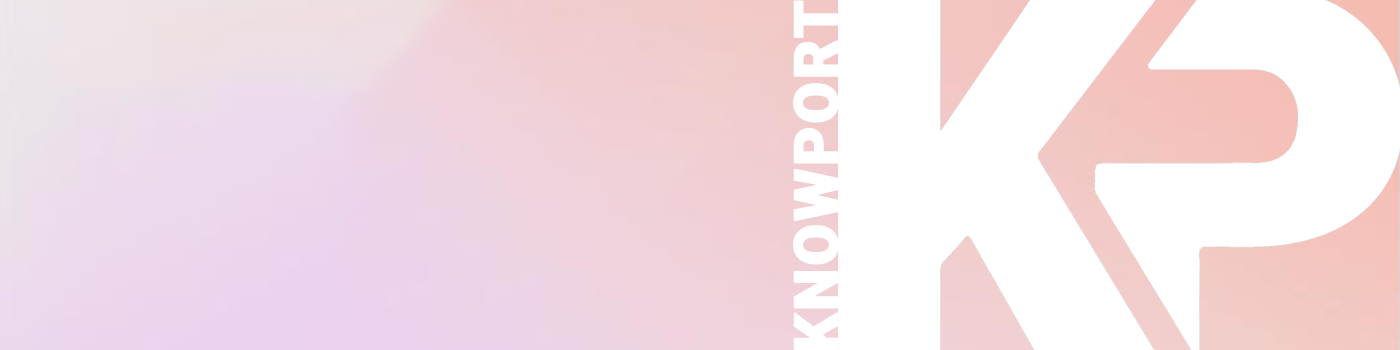
<style>
.page{position:relative;width:1400px;height:350px;background:#ffffff}
.page>*{position:absolute;margin:0}
.t1{font:60px "Roboto-Black";letter-spacing:0.025em;color:#ffffff;font-weight:bold}
</style>
<div class="page">
<p class="t1" style="left:793px;top:0px;width:46px;height:350px;rotate:-90deg">KNOWPORT</p>
</div>
